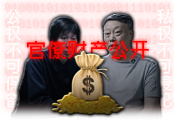
<style>
.page{position:relative;width:174px;height:140px}
.page>*{position:absolute;margin:0}
.t1{font:20.8px "HYPixel-11px-U";color:#ff0400}
</style>
<div class="page">
<p class="t1" style="left:26px;top:40px;width:123px;height:19px">官僚财产公开</p>
</div>
